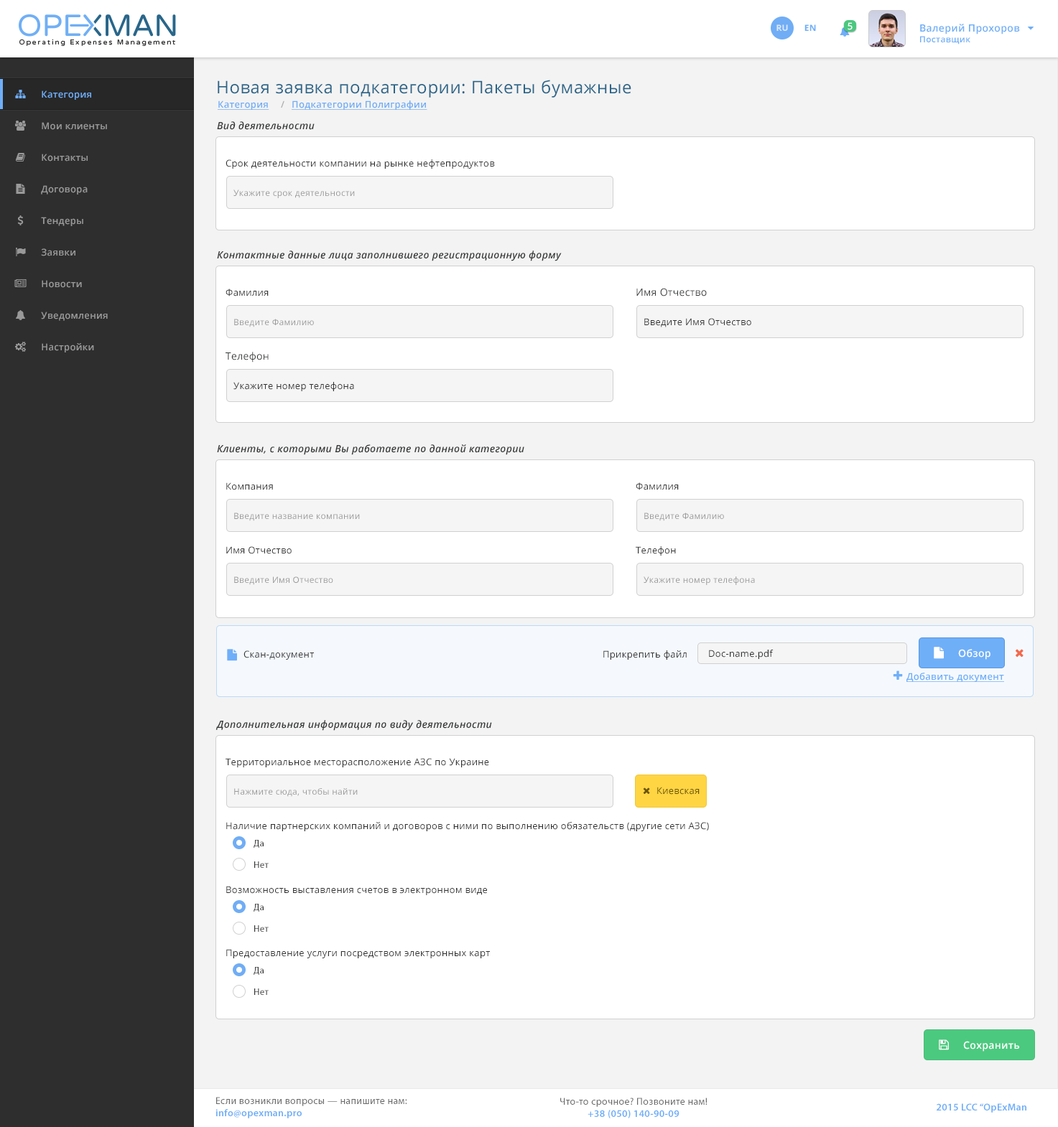
<style>
.page{position:relative;width:1058px;height:1127px;background:#ffffff}
.page>*{position:absolute;margin:0}
.t1{font:8.6px "OpenSans-Bold";letter-spacing:0.025em;color:#dbe8fc;text-transform:uppercase}
.t2{font:8.6px "OpenSans-Bold";letter-spacing:0.025em;color:#6faff8;text-transform:uppercase}
.t3{font:9.3px "OpenSans-Semibold";letter-spacing:0.025em;color:#ffffff}
.t4{font:10px "OpenSans-Semibold";letter-spacing:0.025em;color:#6eaef7}
.t5{font:8.6px "OpenSans-Semibold";letter-spacing:0.025em;color:#6eaef7}
.t6{font:17.2px "OpenSans";letter-spacing:0.025em;color:#2a6589}
.t7{font:9.3px "OpenSans-Semibold";letter-spacing:0.025em;color:#70adf5}
.t8{font:9.3px "OpenSans-Semibold";letter-spacing:0.025em;color:#70adf5;text-decoration:underline}
.t9{font:9.3px "OpenSans-Semibold";letter-spacing:0.025em;color:#afafaf}
.t10{font:9.3px "OpenSans-Semibold";letter-spacing:0.025em;color:#999999}
.t11{font:10px "OpenSans-SemiboldItalic";letter-spacing:0.025em;color:#373838}
.t12{font:9.3px "OpenSans";letter-spacing:0.025em;color:#333333}
.t13{font:8.6px "OpenSans";letter-spacing:0.025em;color:#999999}
.t14{font:10px "OpenSans";letter-spacing:0.025em;color:#373838}
.t15{font:10.1px "OpenSans-Semibold";letter-spacing:0.025em;color:#ffffff}
.t16{font:9.3px "OpenSans-Semibold";letter-spacing:0.025em;color:#6faff8;text-decoration:underline}
.t17{font:9.3px "OpenSans";letter-spacing:0.025em;color:#6b5405}
.t18{font:9.3px "MyriadPro-Regular";letter-spacing:0.025em;color:#333333}
.t19{font:10px "OpenSans-Semibold";letter-spacing:0.025em;color:#ffffff}
.t20{font:10px "MyriadPro-Regular";letter-spacing:0.025em;color:#696969}
.t21{font:10px "MyriadPro-Semibold";letter-spacing:0.025em;color:#6eaef8}
</style>
<div class="page">
<p class="t1" style="left:776px;top:24px;width:12px;height:7px">Ru</p>
<p class="t2" style="left:804px;top:24px;width:12px;height:7px">EN</p>
<p class="t3" style="left:847px;top:22px;width:5px;height:8px">5</p>
<p class="t4" style="left:920px;top:24px;width:100px;height:21px">Валерий Прохоров<br><span class="t5">Поставщик</span></p>
<p class="t6" style="left:218px;top:80px;width:413px;height:18px">Новая заявка подкатегории: Пакеты бумажные</p>
<p class="t7" style="left:42px;top:90px;width:49px;height:10px">Категория</p>
<p class="t8" style="left:218px;top:101px;width:51px;height:9px">Категория</p>
<p class="t9" style="left:281px;top:101px;width:3px;height:7px">/</p>
<p class="t8" style="left:292px;top:101px;width:135px;height:9px">Подкатегории Полиграфии</p>
<p class="t10" style="left:42px;top:122px;width:65px;height:8px">Мои клиенты</p>
<p class="t11" style="left:217px;top:121px;width:98px;height:9px">Вид деятельности</p>
<p class="t10" style="left:42px;top:154px;width:46px;height:8px">Контакты</p>
<p class="t12" style="left:225px;top:159px;width:270px;height:10px">Срок деятельности компании на рынке нефтепродуктов</p>
<p class="t10" style="left:41px;top:185px;width:47px;height:10px">Договора</p>
<p class="t13" style="left:233px;top:190px;width:122px;height:8px">Укажите срок деятельности</p>
<p class="t10" style="left:41px;top:217px;width:42px;height:9px">Тендеры</p>
<p class="t10" style="left:41px;top:248px;width:34px;height:8px">Заявки</p>
<p class="t11" style="left:217px;top:251px;width:345px;height:10px">Контактные данные лица заполнившего регистрационную форму</p>
<p class="t10" style="left:42px;top:280px;width:40px;height:8px">Новости</p>
<p class="t12" style="left:225px;top:289px;width:44px;height:8px">Фамилия</p>
<p class="t14" style="left:636px;top:288px;width:71px;height:9px">Имя Отчество</p>
<p class="t10" style="left:41px;top:312px;width:67px;height:9px">Уведомления</p>
<p class="t13" style="left:234px;top:319px;width:80px;height:8px">Введите Фамилию</p>
<p class="t12" style="left:644px;top:318px;width:107px;height:9px">Введите Имя Отчество</p>
<p class="t10" style="left:42px;top:343px;width:52px;height:10px">Настройки</p>
<p class="t14" style="left:225px;top:352px;width:44px;height:11px">Телефон</p>
<p class="t12" style="left:233px;top:382px;width:121px;height:9px">Укажите номер телефона</p>
<p class="t11" style="left:217px;top:444px;width:307px;height:11px">Клиенты, с которыми Вы работаете по данной категории</p>
<p class="t12" style="left:226px;top:483px;width:47px;height:7px">Компания</p>
<p class="t12" style="left:635px;top:483px;width:44px;height:7px">Фамилия</p>
<p class="t13" style="left:234px;top:513px;width:126px;height:8px">Введите название компании</p>
<p class="t13" style="left:644px;top:513px;width:80px;height:8px">Введите Фамилию</p>
<p class="t12" style="left:226px;top:546px;width:66px;height:8px">Имя Отчество</p>
<p class="t12" style="left:635px;top:546px;width:41px;height:10px">Телефон</p>
<p class="t13" style="left:234px;top:577px;width:99px;height:8px">Введите Имя Отчество</p>
<p class="t13" style="left:643px;top:577px;width:112px;height:8px">Укажите номер телефона</p>
<p class="t12" style="left:243px;top:651px;width:71px;height:9px">Скан-документ</p>
<p class="t12" style="left:603px;top:651px;width:83px;height:9px">Прикрепить файл</p>
<p class="t12" style="left:709px;top:650px;width:64px;height:9px">Doc-name.pdf</p>
<p class="t15" style="left:958px;top:649px;width:32px;height:11px">Обзор</p>
<p class="t16" style="left:906px;top:673px;width:98px;height:9px">Добавить документ</p>
<p class="t11" style="left:215px;top:720px;width:277px;height:11px">Дополнительная информация по виду деятельности</p>
<p class="t12" style="left:225px;top:758px;width:264px;height:10px">Территориальное месторасположение АЗС по Украине</p>
<p class="t13" style="left:234px;top:788px;width:124px;height:9px">Нажмите сюда, чтобы найти</p>
<p class="t17" style="left:657px;top:787px;width:42px;height:8px">Киевская</p>
<p class="t12" style="left:226px;top:822px;width:483px;height:10px">Наличие партнерских компаний и договоров с ними по выполнению обязательств (другие сети АЗС)</p>
<p class="t18" style="left:253px;top:840px;width:11px;height:8px">Да</p>
<p class="t18" style="left:254px;top:862px;width:15px;height:6px">Нет</p>
<p class="t12" style="left:226px;top:886px;width:261px;height:9px">Возможность выставления счетов в электронном виде</p>
<p class="t18" style="left:253px;top:904px;width:11px;height:8px">Да</p>
<p class="t18" style="left:254px;top:926px;width:15px;height:6px">Нет</p>
<p class="t12" style="left:226px;top:949px;width:264px;height:10px">Предоставление услуги посредством электронных карт</p>
<p class="t18" style="left:253px;top:967px;width:11px;height:8px">Да</p>
<p class="t18" style="left:254px;top:989px;width:15px;height:6px">Нет</p>
<p class="t19" style="left:963px;top:1041px;width:56px;height:11px">Сохранить</p>
<p class="t20" style="left:215px;top:1097px;width:192px;height:22px">Если возникли вопросы — напишите нам:<br><span class="t21">info@opexman.pro</span></p>
<p class="t20" style="left:560px;top:1098px;width:147px;height:21px;text-align:center">Что-то срочное? Позвоните нам!<br><span class="t21">+38 (050) 140-90-09</span></p>
<p class="t21" style="left:936px;top:1104px;width:90px;height:9px">2015 LCC “OpExMan</p>
</div>
